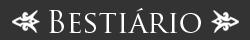
<style>
.page{position:relative;width:250px;height:40px;background:#333333}
.page>*{position:absolute;margin:0}
.t1{font:30px "TrajanPro-Regular";color:#ffffff}
</style>
<div class="page">
<p class="t1" style="left:49px;top:8px;width:152px;height:25px">Bestiário</p>
</div>
